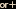
<style>
.page{position:relative;width:16px;height:9px;background:#000000}
.page>*{position:absolute;margin:0}
.t1{font:8px "GothicMB101Pro-Regular";letter-spacing:0.1em;color:#dfceb7}
.t2{font:8px "GothicMB101Pro-Regular";color:#dfceb7}
</style>
<div class="page">
<p class="t1" style="left:0px;top:1px;width:16px;height:7px"><span class="t2">o</span>r+</p>
</div>
